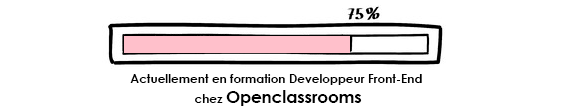
<style>
.page{position:relative;width:584px;height:112px;background:#ffffff}
.page>*{position:absolute;margin:0}
.t1{font:12px "CenturyGothic-Bold";color:#000000}
.t2{font:16.7px "CenturyGothic-Bold";color:#000000}
</style>
<div class="page">
<p class="t1" style="left:130px;top:74px;width:292px;height:32px;text-align:center">Actuellement en formation Developpeur Front-End <br>chez <span class="t2">Openclassrooms</span></p>
</div>
